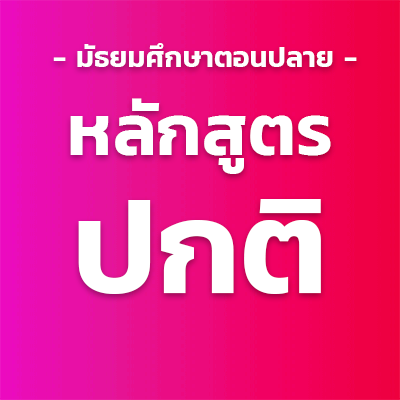
<style>
.page{position:relative;width:400px;height:400px}
.page>*{position:absolute;margin:0}
.t1{font:28.7px "Kanit-SemiBold";color:#ffffff}
.t2{font:72.9px/137.5px "Kanit-SemiBold";color:#ffffff}
.t3{font:133.3px/137.5px "Kanit-SemiBold";color:#ffffff}
</style>
<div class="page">
<p class="t1" style="left:53px;top:43px;width:304px;height:24px">- มัธยมศึกษาตอนปลาย -</p>
<p class="t2" style="left:70px;top:98px;width:261px;height:196px;text-align:center">หลักสูตร<br><span class="t3">ปกติ<br></span>EMSP</p>
</div>
